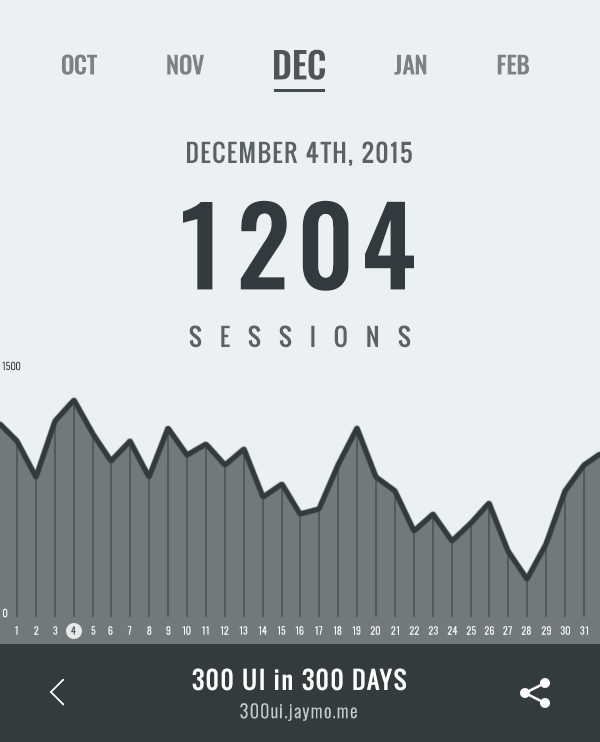
<style>
.page{position:relative;width:600px;height:742px;background:#ecf0f1}
.page>*{position:absolute;margin:0}
.t1{font:24px "Oswald-Medium";color:#7c8183}
.t2{font:36px "Oswald-Medium";color:#4f5557}
.t3{font:24px "Oswald-Regular";letter-spacing:0.075em;color:#5c6163}
.t4{font:108px "Oswald-Medium";letter-spacing:0.075em;color:#333a3d}
.t5{font:24px "Oswald-Regular";letter-spacing:0.75em;color:#5c6163}
.t6{font:10px "Oswald-Light";color:#333b3d}
.t7{font:10px "Oswald-Light";color:#ffffff}
.t8{font:10px "Oswald-Light";color:#444b4c}
.t9{font:24px "Oswald-Regular";letter-spacing:0.075em;color:#ffffff}
.t10{font:18px "Oswald-Light";letter-spacing:0.075em;color:#c9cbcb}
</style>
<div class="page">
<p class="t1" style="left:62px;top:54px;width:35px;height:21px">OCT</p>
<p class="t1" style="left:167px;top:54px;width:37px;height:21px">NOV</p>
<p class="t2" style="left:274px;top:49px;width:51px;height:31px">DEC</p>
<p class="t1" style="left:394px;top:54px;width:33px;height:21px">JAN</p>
<p class="t1" style="left:497px;top:54px;width:32px;height:21px">FEB</p>
<p class="t3" style="left:187px;top:141px;width:225px;height:25px">DECEMBER 4TH, 2015</p>
<p class="t4" style="left:183px;top:200px;width:231px;height:91px">1204</p>
<p class="t5" style="left:189px;top:325px;width:222px;height:23px">SESSIONS</p>
<p class="t6" style="left:2px;top:361px;width:19px;height:10px">1500</p>
<p class="t7" style="left:3px;top:608px;width:5px;height:10px">0</p>
<p class="t7" style="left:15px;top:626px;width:3px;height:9px">1</p>
<p class="t7" style="left:34px;top:626px;width:5px;height:9px">2</p>
<p class="t7" style="left:53px;top:626px;width:5px;height:9px">3</p>
<p class="t8" style="left:71px;top:626px;width:5px;height:9px">4</p>
<p class="t7" style="left:91px;top:626px;width:5px;height:9px">5</p>
<p class="t7" style="left:108px;top:626px;width:5px;height:9px">6</p>
<p class="t7" style="left:127px;top:626px;width:5px;height:9px">7</p>
<p class="t7" style="left:147px;top:626px;width:5px;height:9px">8</p>
<p class="t7" style="left:166px;top:626px;width:5px;height:9px">9</p>
<p class="t7" style="left:182px;top:626px;width:9px;height:9px">10</p>
<p class="t7" style="left:202px;top:626px;width:7px;height:9px">11</p>
<p class="t7" style="left:220px;top:626px;width:9px;height:9px">12</p>
<p class="t7" style="left:239px;top:626px;width:9px;height:9px">13</p>
<p class="t7" style="left:258px;top:626px;width:9px;height:9px">14</p>
<p class="t7" style="left:277px;top:626px;width:9px;height:9px">15</p>
<p class="t7" style="left:295px;top:626px;width:9px;height:9px">16</p>
<p class="t7" style="left:315px;top:626px;width:8px;height:9px">17</p>
<p class="t7" style="left:333px;top:626px;width:9px;height:9px">18</p>
<p class="t7" style="left:352px;top:626px;width:9px;height:9px">19</p>
<p class="t7" style="left:370px;top:626px;width:10px;height:9px">20</p>
<p class="t7" style="left:391px;top:626px;width:8px;height:9px">21</p>
<p class="t7" style="left:409px;top:626px;width:10px;height:9px">22</p>
<p class="t7" style="left:428px;top:626px;width:10px;height:9px">23</p>
<p class="t7" style="left:447px;top:626px;width:11px;height:9px">24</p>
<p class="t7" style="left:466px;top:626px;width:10px;height:9px">25</p>
<p class="t7" style="left:484px;top:626px;width:10px;height:9px">26</p>
<p class="t7" style="left:503px;top:626px;width:9px;height:9px">27</p>
<p class="t7" style="left:521px;top:626px;width:10px;height:9px">28</p>
<p class="t7" style="left:541px;top:626px;width:10px;height:9px">29</p>
<p class="t7" style="left:560px;top:626px;width:10px;height:9px">30</p>
<p class="t7" style="left:580px;top:626px;width:8px;height:9px">31</p>
<p class="t9" style="left:192px;top:668px;width:214px;height:23px">300 UI in 300 DAYS</p>
<p class="t10" style="left:240px;top:703px;width:117px;height:18px">300ui.jaymo.me</p>
</div>
